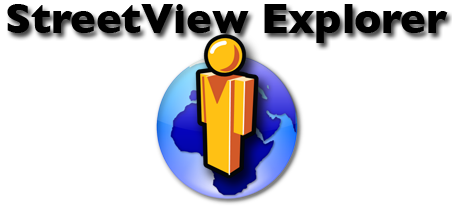
<style>
.page{position:relative;width:452px;height:207px;background:#ffffff}
.page>*{position:absolute;margin:0}
.t1{font:43.4px "GillSans-Bold";color:#000000}
</style>
<div class="page">
<p class="t1" style="left:7px;top:4px;width:441px;height:39px">StreetView Explorer</p>
</div>
